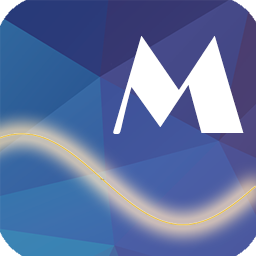
<style>
.page{position:relative;width:256px;height:256px}
.page>*{position:absolute;margin:0}
.t1{font:140px "Broadway";color:#ffffff}
</style>
<div class="page">
<p class="t1" style="left:113px;top:36px;width:131px;height:98px">M</p>
</div>
